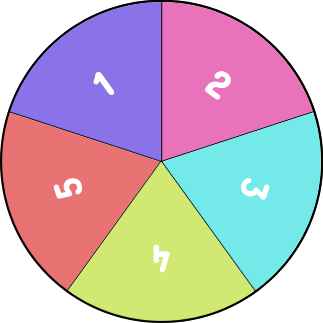
<style>
.page{position:relative;width:323px;height:323px;background:#ffffff}
.page>*{position:absolute;margin:0}
.t1{font:40px "ConcertOne-Regular";color:#ffffff}
</style>
<div class="page">
<p class="t1" style="left:93px;top:71px;width:22px;height:25px;rotate:-36deg">1</p>
<p class="t1" style="left:205px;top:71px;width:27px;height:29px;rotate:36deg">2</p>
<p class="t1" style="left:53px;top:178px;width:30px;height:21px;rotate:-108deg">5</p>
<p class="t1" style="left:240px;top:178px;width:30px;height:22px;rotate:108deg">3</p>
<p class="t1" style="left:153px;top:244px;width:17px;height:29px;rotate:180deg">4</p>
</div>
